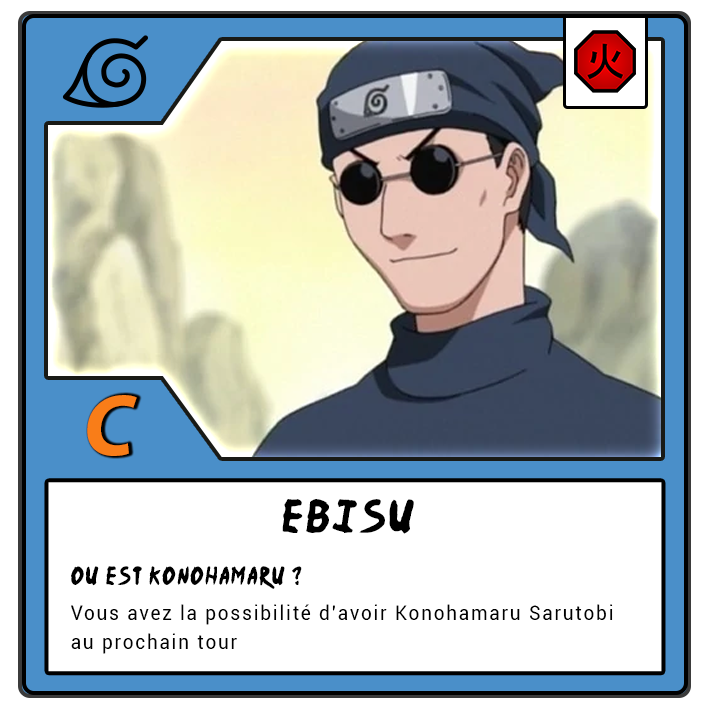
<style>
.page{position:relative;width:709px;height:709px;background:#ffffff}
.page>*{position:absolute;margin:0}
.t1{font:87.5px "MyriadPro-BoldIt";letter-spacing:-0.12em;color:#f97d18}
.t2{font:37.5px "Ninja-Naruto";letter-spacing:0.1em;color:#000000}
.t3{font:20.8px "Ninja-Naruto";letter-spacing:0.1em;color:#000000;scale:0.9 1}
.t4{font:20.8px/29.2px "Roboto-Regular";letter-spacing:0.1em;color:#000000;scale:0.9 1}
</style>
<div class="page">
<p class="t1" style="left:87px;top:395px;width:50px;height:61px">C</p>
<p class="t2" style="left:282px;top:499px;width:132px;height:35px">EBISU</p>
<p class="t3" style="left:71px;top:566px;width:231px;height:23px">ou est Konohamaru ?</p>
<p class="t4" style="left:71px;top:604px;width:542px;height:50px">Vous avez la possibilité d’avoir Konohamaru Sarutobi<br>au prochain tour</p>
</div>
